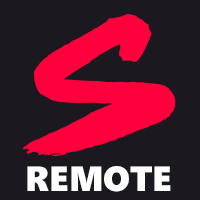
<style>
.page{position:relative;width:200px;height:200px;background:#1b191f}
.page>*{position:absolute;margin:0}
.t1{font:197.1px "DeadStock";color:#ff003c;text-transform:uppercase}
.t2{font:35px "SegoeUIBlack";color:#ffffff;text-transform:uppercase}
</style>
<div class="page">
<p class="t1" style="left:23px;top:14px;width:153px;height:142px">S</p>
<p class="t2" style="left:27px;top:166px;width:144px;height:26px">remote</p>
</div>
